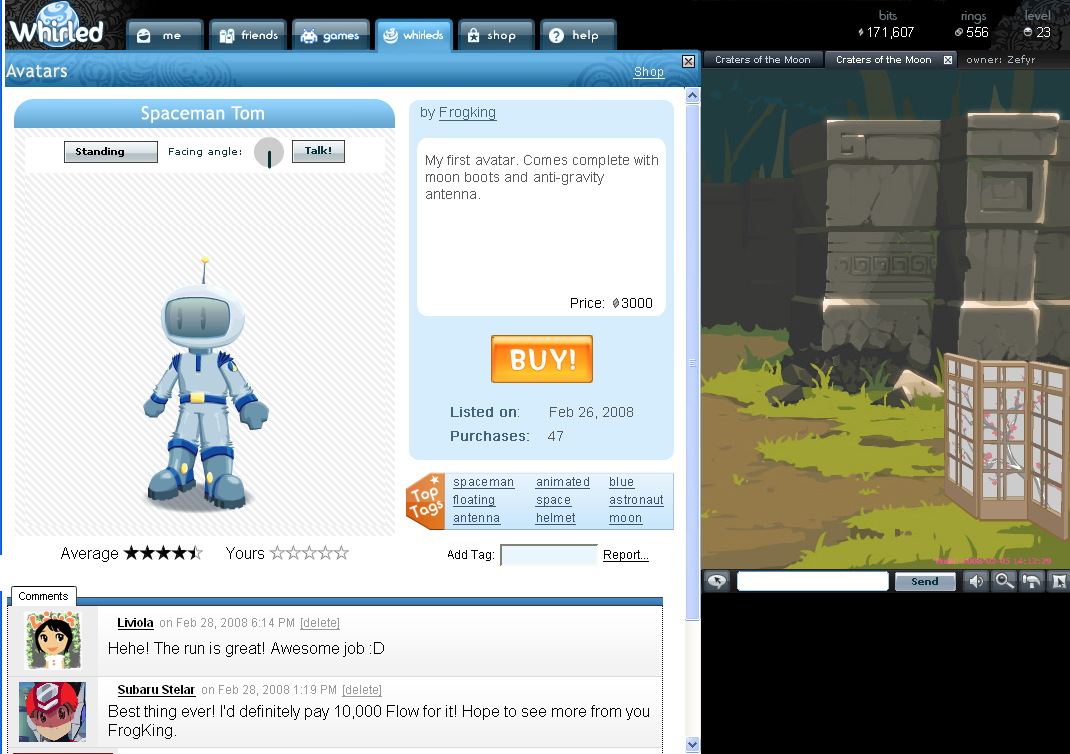
<style>
.page{position:relative;width:1070px;height:754px;background:#ffffff}
.page>*{position:absolute;margin:0}
.t1{font:14px "BlippoLightSF";letter-spacing:0.015em;color:#6a787c}
.t2{font:22.8px "SunnySide";color:#ffffff}
.t3{font:12px "BlippoLightSF";letter-spacing:0.1em;color:#ffffff;scale:1.07 1}
.t4{font:12px "BlippoLightSF";letter-spacing:0.05em;color:#ffffff;scale:1.07 1}
.t5{font:12px "BlippoLightSF";letter-spacing:0.025em;color:#ffffff;scale:1.07 1}
.t6{font:12px "BlippoLightSF";color:#ffffff;scale:1.07 1}
.t7{font:13px "ArialMT";letter-spacing:0.025em;color:#ffffff}
.t8{font:18px "TrebuchetMS";letter-spacing:0.025em;color:#f3eedb}
.t9{font:12px "ArialMT";letter-spacing:0.025em;color:#f3eedb;text-decoration:underline}
.t10{font:18px "TrebuchetMS";letter-spacing:0.025em;color:#ffffff}
.t11{font:14px "ArialMT";letter-spacing:0.01em;color:#45647b;text-decoration:underline}
.t12{font:14px "ArialMT";letter-spacing:0.01em;color:#45647b}
.t13{font:14px "ArialMT";letter-spacing:0.01em;color:#585858}
.t14{font:24px "SunnySide";letter-spacing:0.12em;color:#ffffff}
.t15{font:14px/24px "ArialMT";color:#585858}
.t16{font:14px/24px "ArialMT";color:#45647b;font-weight:bold}
.t17{font:14px/24px "ArialMT";color:#45647b}
.t18{font:12px/18px "ArialMT";letter-spacing:0.025em;color:#3d5174;text-decoration:underline}
</style>
<div class="page">
<p class="t1" style="left:879px;top:10px;width:172px;height:14px">bits               rings         level</p>
<p class="t2" style="left:9px;top:20px;width:94px;height:22px">Whirled</p>
<p class="t2" style="left:9px;top:20px;width:94px;height:22px">Whirled</p>
<p class="t3" style="left:163px;top:30px;width:435px;height:13px">me                <span class="t4">friends            </span><span class="t5">games</span><span class="t6">            whirleds            </span>shop               help</p>
<p class="t3" style="left:163px;top:30px;width:435px;height:13px">me                <span class="t4">friends            </span><span class="t5">games</span><span class="t6">            whirleds            </span>shop               help</p>
<p class="t7" style="left:868px;top:27px;width:182px;height:12px">171,607            556           23</p>
<p class="t5" style="left:323px;top:33px;width:36px;height:10px"><span class="t6">           </span>games</p>
<p class="t5" style="left:323px;top:33px;width:36px;height:10px"><span class="t6">           </span>games</p>
<p class="t8" style="left:6px;top:63px;width:61px;height:15px">Avatars</p>
<p class="t9" style="left:633px;top:67px;width:32px;height:12px">Shop</p>
<p class="t10" style="left:141px;top:106px;width:123px;height:17px">Spaceman Tom</p>
<p class="t11" style="left:421px;top:107px;width:76px;height:14px"><span class="t12">by </span>Frogking</p>
<p class="t13" style="left:426px;top:155px;width:232px;height:44px">My first avatar. Comes complete with moon boots and anti-gravity antenna.</p>
<p class="t14" style="left:510px;top:348px;width:65px;height:23px">BUY!</p>
<p class="t15" style="left:451px;top:407px;width:182px;height:34px"><span class="t16">Listed on</span><span class="t17">:  </span>     Feb 26, 2008<br><span class="t16">Purchases: </span>   47</p>
<p class="t18" style="left:453px;top:479px;width:62px;height:46px">spaceman<br>floating<br>antenna</p>
<p class="t18" style="left:535px;top:477px;width:55px;height:48px">animated<br>space<br>helmet</p>
<p class="t18" style="left:609px;top:477px;width:55px;height:48px">blue<br>astronaut<br>moon</p>
</div>
